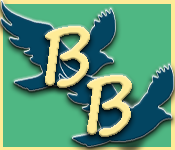
<style>
.page{position:relative;width:175px;height:150px;background:#4fb783}
.page>*{position:absolute;margin:0}
.t1{font:80px "SegoePrint-Bold";color:#feeb97;scale:0.92 1}
</style>
<div class="page">
<p class="t1" style="left:45px;top:26px;width:45px;height:62px">B</p>
<p class="t1" style="left:87px;top:75px;width:45px;height:62px">B</p>
</div>
